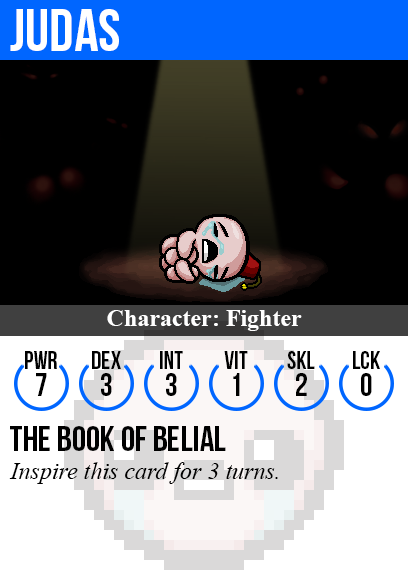
<style>
.page{position:relative;width:408px;height:585px;background:#000000}
.page>*{position:absolute;margin:0}
.t1{font:60px "BebasNeue";color:#ffffff}
.t2{font:24px "TimesNewRomanPS-BoldMT";color:#ffffff}
.t3{font:25px "BebasNeue";color:#000000}
.t4{font:32px "BebasNeue";color:#000000}
.t5{font:36px "BebasNeue";color:#000000}
.t6{font:24px "TimesNewRomanPS-ItalicMT";color:#000000}
</style>
<div class="page">
<p class="t1" style="left:10px;top:9px;width:109px;height:42px">judas</p>
<p class="t2" style="left:107px;top:310px;width:195px;height:21px">Character: Fighter</p>
<p class="t3" style="left:25px;top:351px;width:32px;height:18px">PWR</p>
<p class="t3" style="left:92px;top:351px;width:29px;height:18px">dex</p>
<p class="t3" style="left:160px;top:351px;width:23px;height:18px">int</p>
<p class="t3" style="left:224px;top:351px;width:24px;height:18px">vit</p>
<p class="t3" style="left:287px;top:351px;width:28px;height:18px">skl</p>
<p class="t3" style="left:353px;top:351px;width:27px;height:18px">lck</p>
<p class="t4" style="left:36px;top:373px;width:11px;height:23px">7</p>
<p class="t4" style="left:101px;top:373px;width:11px;height:23px">3</p>
<p class="t4" style="left:166px;top:373px;width:11px;height:23px">3</p>
<p class="t4" style="left:233px;top:373px;width:7px;height:23px">1</p>
<p class="t4" style="left:296px;top:373px;width:11px;height:23px">2</p>
<p class="t4" style="left:361px;top:373px;width:11px;height:23px">0</p>
<p class="t5" style="left:10px;top:426px;width:216px;height:25px">the book of belial</p>
<p class="t6" style="left:9px;top:462px;width:269px;height:22px">Inspire this card for 3 turns.</p>
</div>
